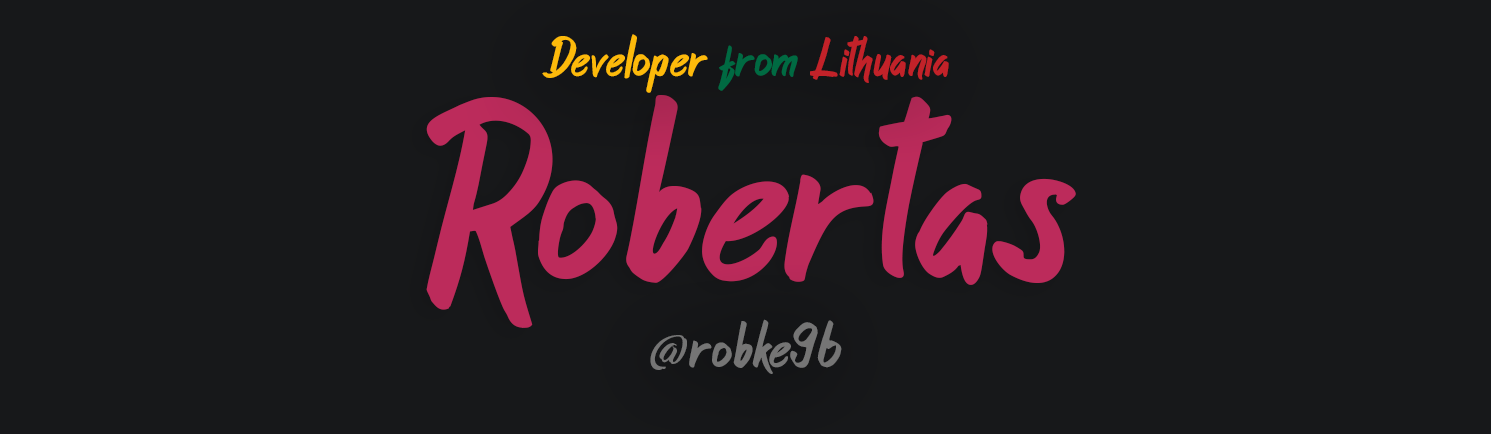
<style>
.page{position:relative;width:1491px;height:434px;background:#17181a}
.page>*{position:absolute;margin:0}
.t1{font:57.2px "ButterPineappleRegular";color:#fdba0b}
.t2{font:57.2px "ButterPineappleRegular";color:#006a42}
.t3{font:57.2px "ButterPineappleRegular";color:#c22229}
.t4{font:261.5px "ButterPineappleRegular";color:#bc2b5b}
.t5{font:65.5px "ButterPineappleRegular";color:#757575}
.t6{font:45.8px "WorkInProgress";color:#757575}
</style>
<div class="page">
<p class="t1" style="left:542px;top:34px;width:407px;height:59px">Developer <span class="t2">from </span><span class="t3">Lithuania</span></p>
<p class="t4" style="left:426px;top:95px;width:650px;height:233px">Robertas</p>
<p class="t5" style="left:650px;top:319px;width:192px;height:55px"><span class="t6">@</span>robke96</p>
</div>
